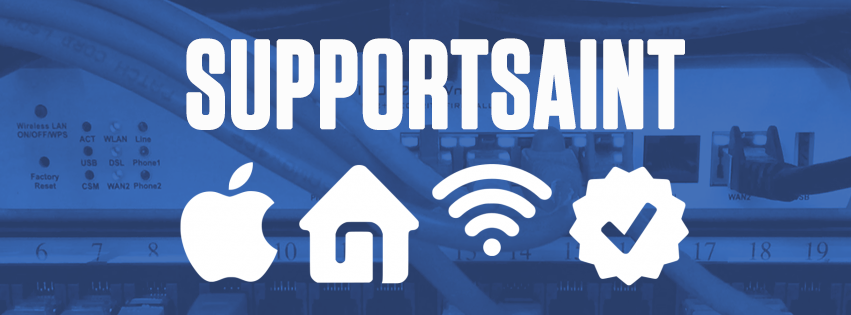
<style>
.page{position:relative;width:851px;height:315px}
.page>*{position:absolute;margin:0}
.t1{font:123.5px "Tungsten-Semibold";color:#fcfcfc;font-weight:bold;scale:0.92 1}
</style>
<div class="page">
<p class="t1" style="left:186px;top:38px;width:499px;height:92px">SUPPORTSAINT</p>
</div>
